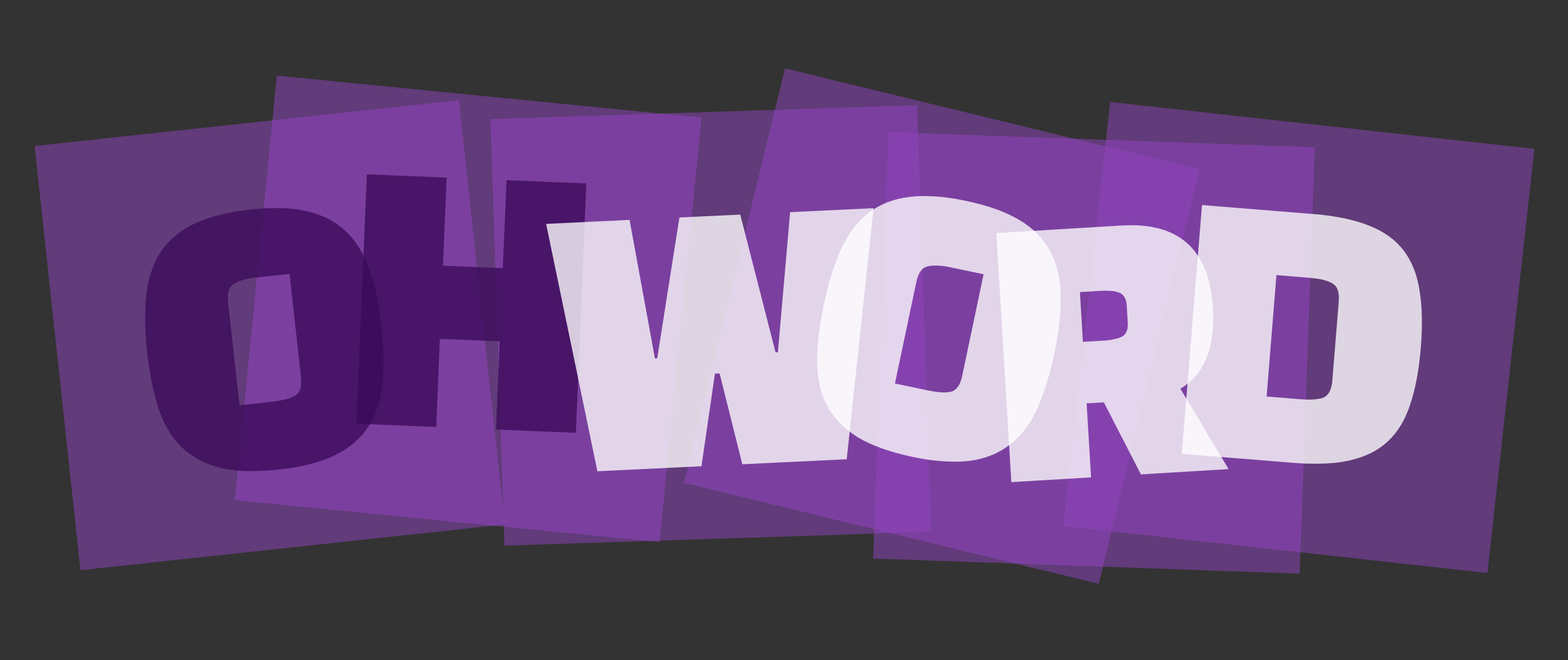
<style>
.page{position:relative;width:1568px;height:660px;background:#333333}
.page>*{position:absolute;margin:0}
.t1{font:332.8px "BlackHanSans-Regular";color:#3b0a59}
.t2{font:332.8px "BlackHanSans-Regular"}
.t3{font:332.8px "BlackHanSans-Regular";color:#e2d5ea}
.t4{font:332.8px "BlackHanSans-Regular";color:#e4d6ed}
</style>
<div class="page">
<p class="t1" style="left:356px;top:174px;width:230px;height:259px;rotate:2deg;opacity:0.78">H</p>
<p class="t2" style="left:817px;top:194px;width:245px;height:271px;rotate:12deg">O</p>
<p class="t1" style="left:143px;top:206px;width:243px;height:268px;rotate:-6deg;opacity:0.78">O</p>
<p class="t3" style="left:546px;top:208px;width:328px;height:264px;rotate:-3deg">W</p>
<p class="t3" style="left:1181px;top:205px;width:243px;height:261px;rotate:5deg">D</p>
<p class="t4" style="left:996px;top:220px;width:233px;height:263px;rotate:-3deg">R</p>
</div>
